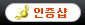
<style>
.page{position:relative;width:85px;height:25px;background:#ffffff}
.page>*{position:absolute;margin:0}
.t1{font:12px "morris9";color:#ff3c00;font-weight:bold}
</style>
<div class="page">
<p class="t1" style="left:34px;top:8px;width:33px;height:10px">인증샵</p>
</div>
